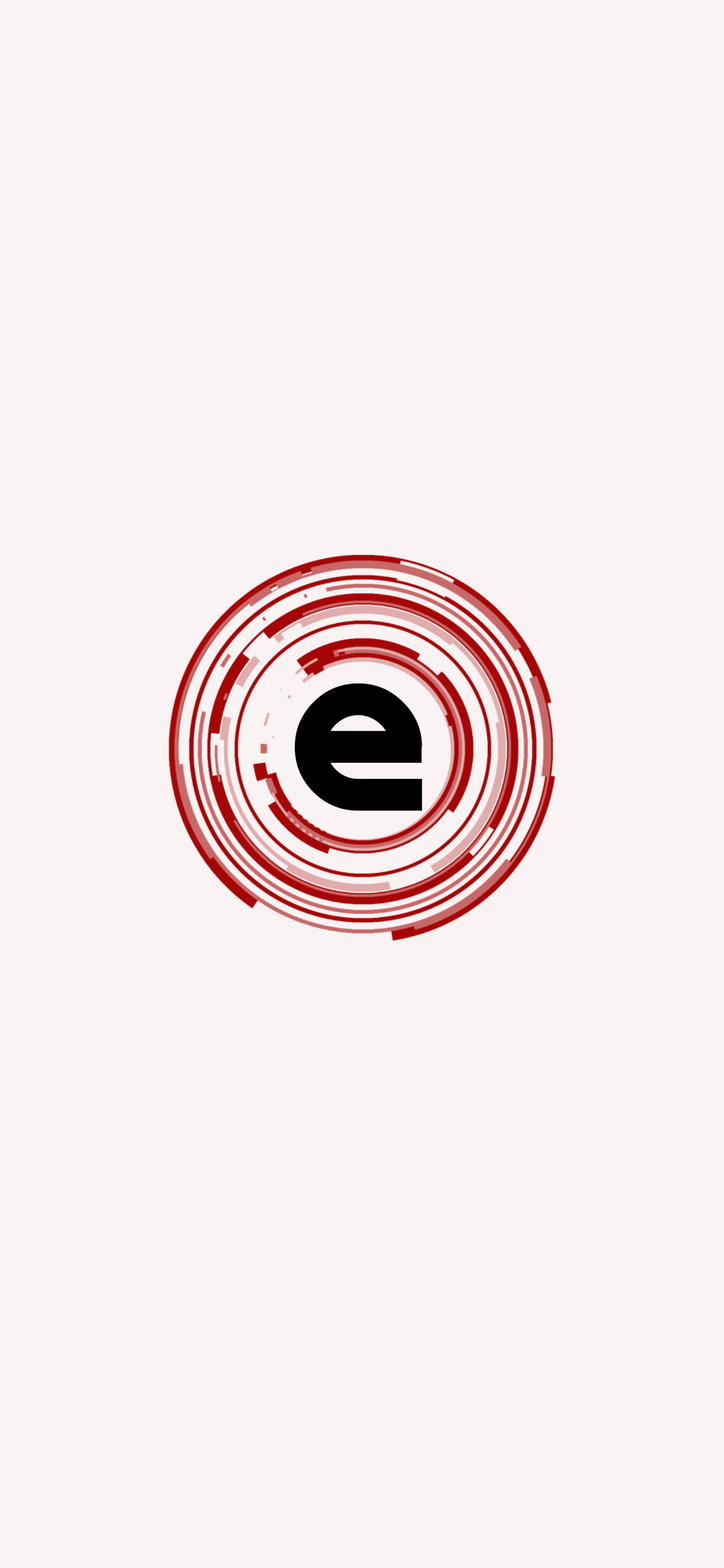
<style>
.page{position:relative;width:724px;height:1568px;background:#faf3f3}
.page>*{position:absolute;margin:0}
.t1{font:148px "Astro-867-Regular";color:#000000}
</style>
<div class="page">
<p class="t1" style="left:295px;top:683px;width:127px;height:128px">E</p>
</div>
